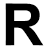
<style>
.page{position:relative;width:48px;height:48px;background:#ffffff}
.page>*{position:absolute;margin:0}
.t1{font:58.3px "Arial-BoldMT";color:#000000}
</style>
<div class="page">
<p class="t1" style="left:5px;top:3px;width:39px;height:43px">R</p>
</div>
